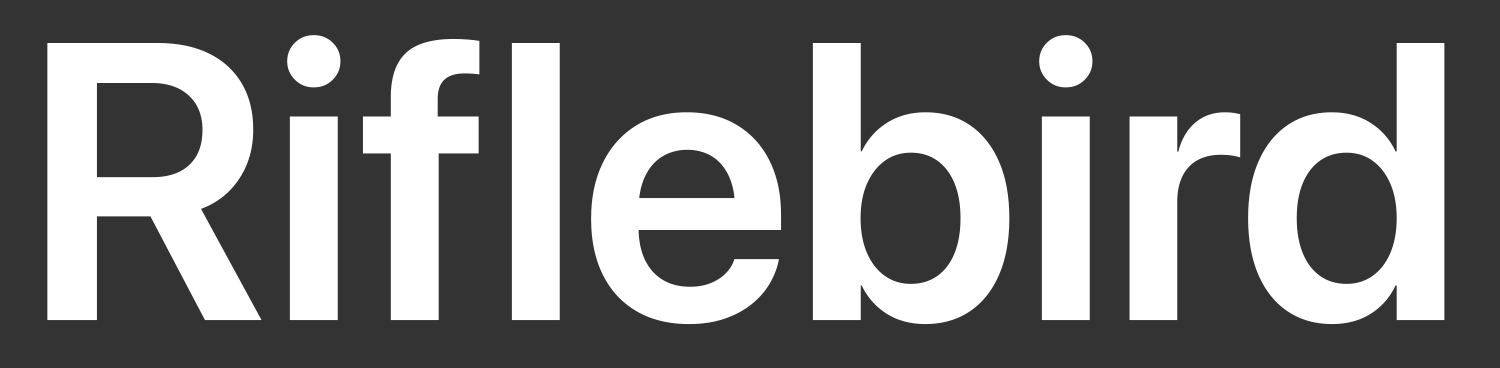
<style>
.page{position:relative;width:1500px;height:368px;background:#333333}
.page>*{position:absolute;margin:0}
.t1{font:393.1px "SFPro-Semibold";color:#ffffff}
</style>
<div class="page">
<p class="t1" style="left:47px;top:35px;width:1398px;height:290px">Riflebird</p>
</div>
